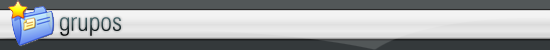
<style>
.page{position:relative;width:550px;height:50px}
.page>*{position:absolute;margin:0}
.t1{font:26px "ZurichBT-LightCondensed"}
</style>
<div class="page">
<p class="t1" style="left:60px;top:17px;width:61px;height:19px">grupos</p>
</div>
